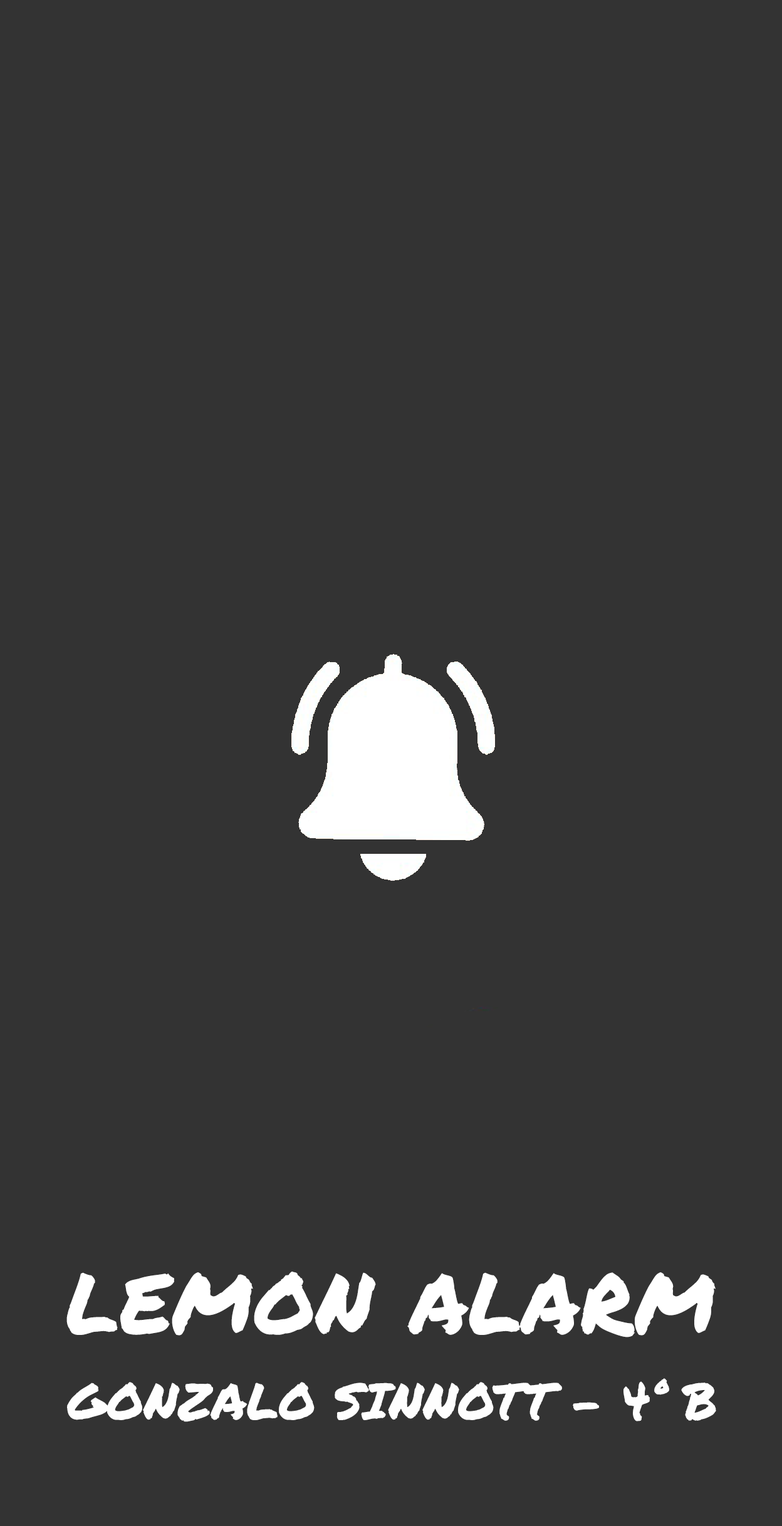
<style>
.page{position:relative;width:782px;height:1526px;background:#333333}
.page>*{position:absolute;margin:0}
.t1{font:100.2px "PermanentMarker-Regular";color:#ffffff}
.t2{font:50.1px "PermanentMarker-Regular";color:#fefefe}
</style>
<div class="page">
<p class="t1" style="left:66px;top:1271px;width:649px;height:66px">lemon alarm</p>
<p class="t2" style="left:67px;top:1378px;width:649px;height:44px">GONZALO SINNOTT - 4° B</p>
</div>
